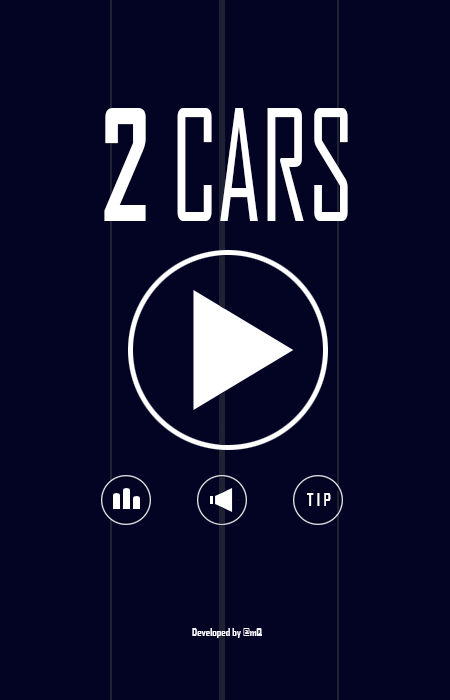
<style>
.page{position:relative;width:450px;height:700px;background:#030424}
.page>*{position:absolute;margin:0}
.t1{font:147.8px "AgencyFB-Reg";color:#ffffff;scale:0.74 1}
.t2{font:147.8px "AgencyFB-Bold";color:#ffffff;scale:0.74 1}
.t3{font:11.1px "AgencyFB-Bold";color:#f4f5fc}
</style>
<div class="page">
<p class="t1" style="left:104px;top:108px;width:244px;height:113px"><span class="t2">2</span> CARS</p>
<p class="t3" style="left:192px;top:628px;width:70px;height:10px">Developed by @mQ</p>
</div>
